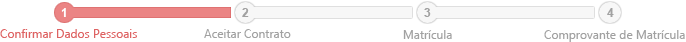
<style>
.page{position:relative;width:686px;height:42px;background:#ffffff}
.page>*{position:absolute;margin:0}
.t1{font:12px "Arial-BoldMT";color:#fffefe}
.t2{font:12px "Arial-BoldMT";color:#a1a1a1}
.t3{font:12px "SegoeUI";color:#de6363}
.t4{font:12px "SegoeUI";color:#a1a1a1}
</style>
<div class="page">
<p class="t1" style="left:61px;top:8px;width:5px;height:9px">1</p>
<p class="t2" style="left:242px;top:8px;width:7px;height:9px">2</p>
<p class="t2" style="left:424px;top:8px;width:7px;height:9px">3</p>
<p class="t2" style="left:607px;top:8px;width:7px;height:9px">4</p>
<p class="t3" style="left:0px;top:29px;width:137px;height:9px">Confirmar Dados Pessoais</p>
<p class="t4" style="left:204px;top:29px;width:87px;height:9px">Aceitar Contrato</p>
<p class="t4" style="left:403px;top:30px;width:49px;height:9px">Matrícula</p>
<p class="t4" style="left:544px;top:30px;width:141px;height:12px">Comprovante de Matrícula</p>
</div>
